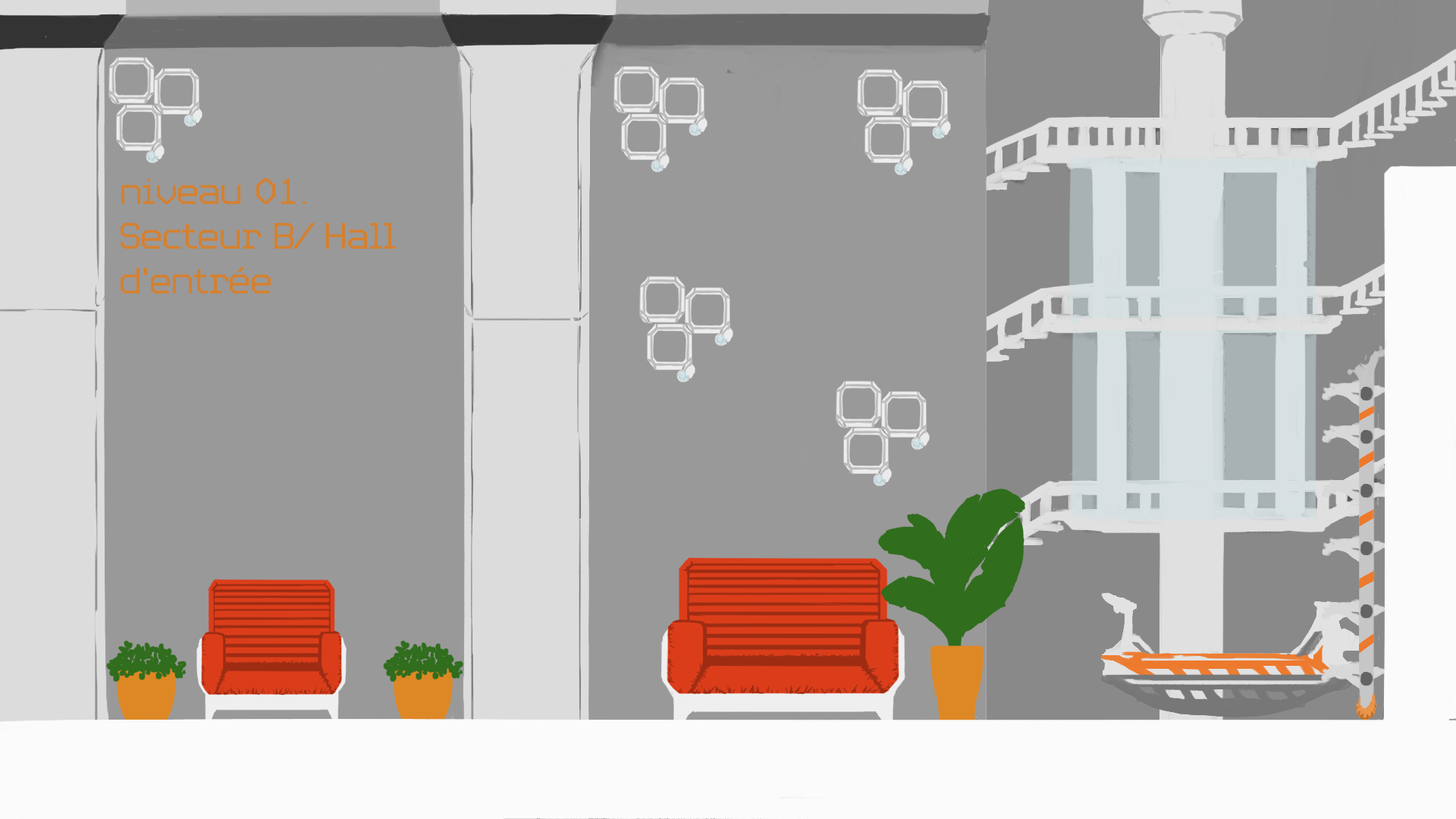
<style>
.page{position:relative;width:1456px;height:819px;background:#999999}
.page>*{position:absolute;margin:0}
.t1{font:37.2px "Video-Light";color:#d48231}
</style>
<div class="page">
<p class="t1" style="left:121px;top:178px;width:275px;height:115px">niveau 01. <br>Secteur B/ Hall d’entrée</p>
</div>
